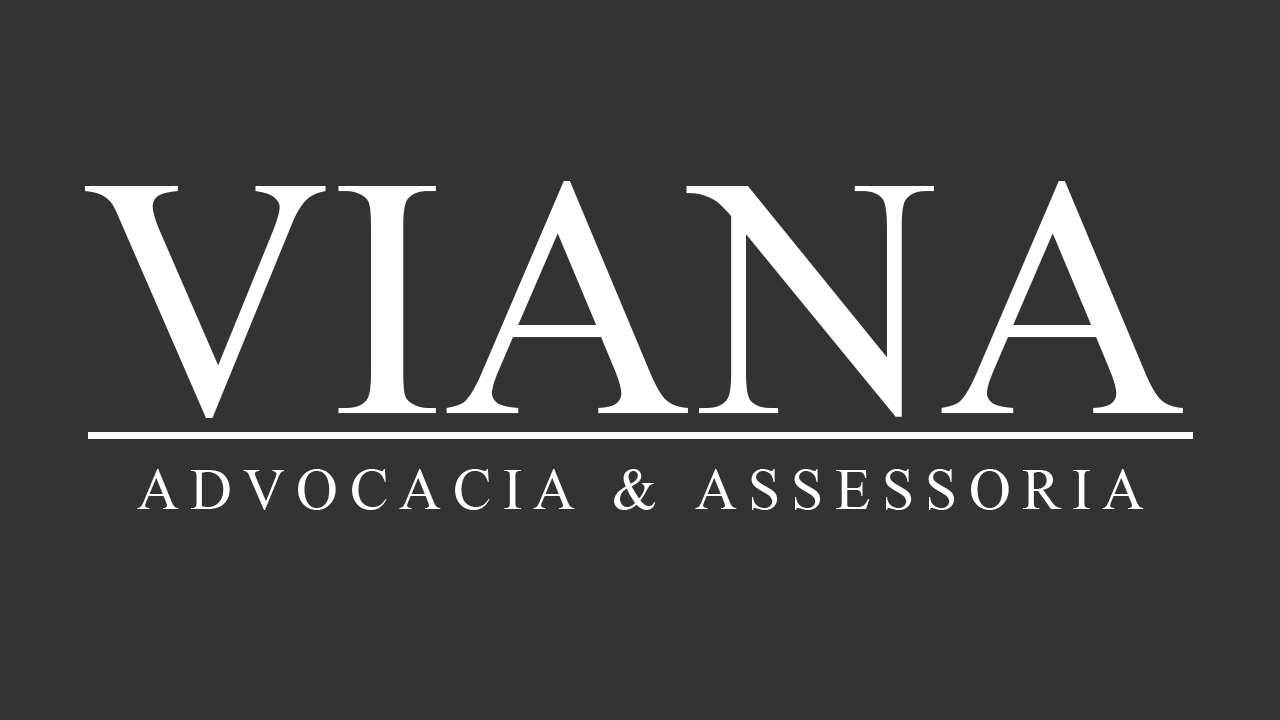
<style>
.page{position:relative;width:1280px;height:720px;background:#333333}
.page>*{position:absolute;margin:0}
.t1{font:342.7px "TimesNewRomanPSMT";color:#ffffff}
.t2{font:57.6px "TimesNewRomanPSMT";letter-spacing:0.2em;color:#ffffff}
</style>
<div class="page">
<p class="t1" style="left:84px;top:181px;width:1099px;height:237px">VIANA</p>
<p class="t2" style="left:137px;top:469px;width:1007px;height:41px">ADVOCACIA &amp; ASSESSORIA</p>
</div>
